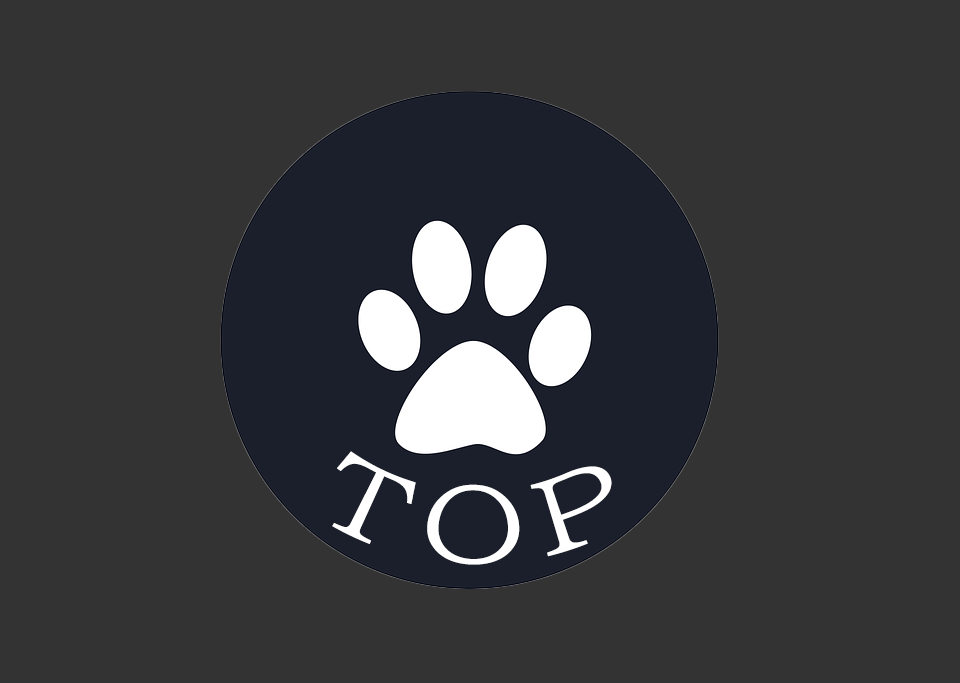
<style>
.page{position:relative;width:960px;height:683px;background:#333333}
.page>*{position:absolute;margin:0}
.t1{font:99px "BIZ-UDPMincho-Medium";letter-spacing:0.075em;color:#ffffff}
</style>
<div class="page">
<p class="t1" style="left:332px;top:451px;width:280px;height:114px">TOP</p>
</div>
